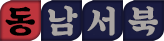
<style>
.page{position:relative;width:164px;height:41px}
.page>*{position:absolute;margin:0}
.t1{font:33.1px "SDKukdetopokki-bBd";color:#000000}
.t2{font:33.1px "SDKukdetopokki-bBd";color:#aaa5a2}
</style>
<div class="page">
<p class="t1" style="left:5px;top:6px;width:30px;height:30px">동</p>
<p class="t2" style="left:48px;top:5px;width:30px;height:31px">남</p>
<p class="t2" style="left:87px;top:6px;width:28px;height:30px">서</p>
<p class="t2" style="left:128px;top:6px;width:30px;height:30px">북</p>
</div>
